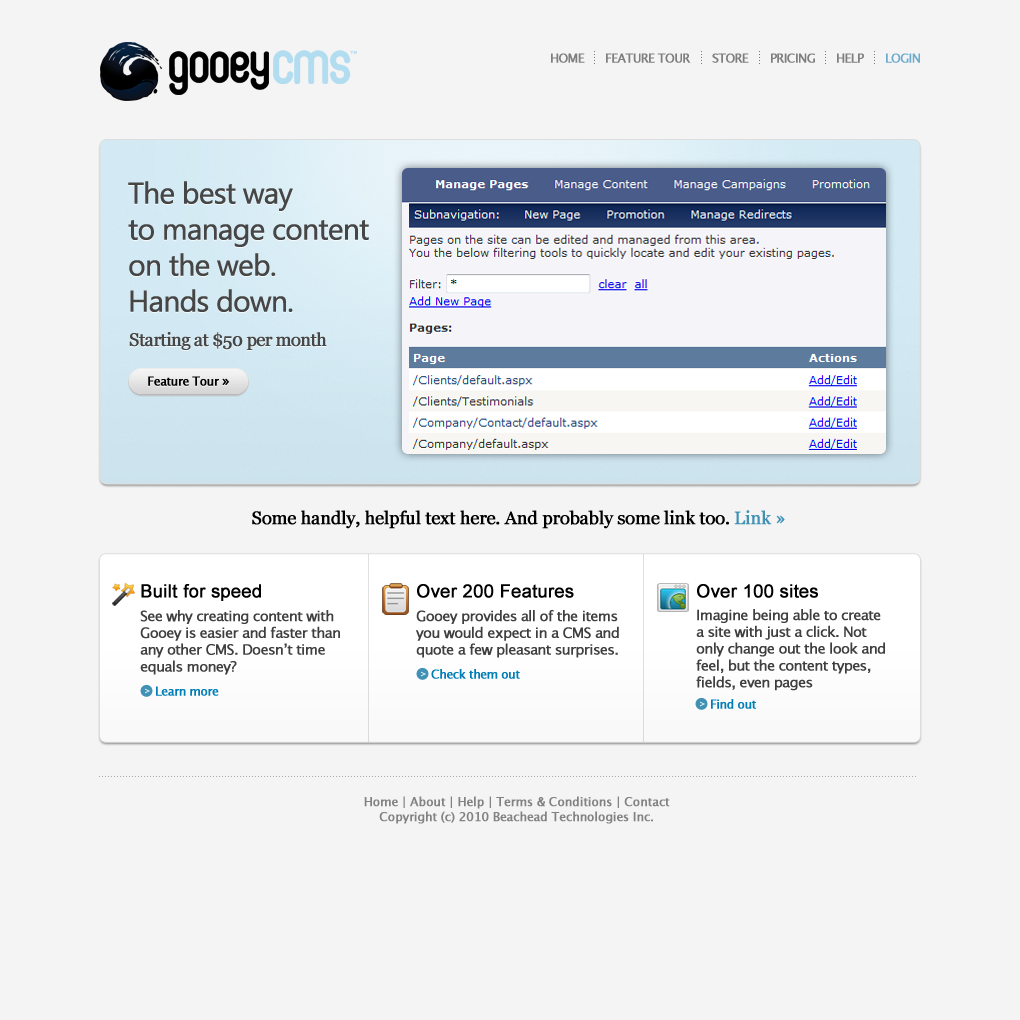
<style>
.page{position:relative;width:1020px;height:1020px;background:#f4f4f4}
.page>*{position:absolute;margin:0}
.t1{font:12px "LucidaGrande";letter-spacing:-0.05em;color:#7e7e7e;font-weight:bold}
.t2{font:12px "LucidaGrande";letter-spacing:-0.05em;color:#6eabcf;font-weight:bold}
.t3{font:30px "SegoeUI";letter-spacing:-0.05em;color:#464646;font-weight:bold}
.t4{font:18px "Georgia";letter-spacing:-0.05em;color:#464646;font-weight:bold}
.t5{font:12px "LucidaGrande";letter-spacing:-0.05em;color:#000000;font-weight:bold}
.t6{font:14px "LucidaGrande";letter-spacing:-0.05em;color:#000000;font-weight:bold}
.t7{font:18px "Georgia";letter-spacing:-0.025em;color:#000000;font-weight:bold}
.t8{font:18px "Georgia";letter-spacing:-0.025em;color:#4191b5;font-weight:bold}
.t9{font:18px "Georgia";letter-spacing:-0.05em;color:#4191b5;font-weight:bold}
.t10{font:18px "ArialMT";color:#000000;font-weight:bold}
.t11{font:14px "LucidaGrande";letter-spacing:-0.05em;color:#3f3f3f;font-weight:bold}
.t12{font:12px "LucidaGrande";letter-spacing:-0.05em;color:#027eb6;font-weight:bold}
.t13{font:12px "LucidaGrande";letter-spacing:-0.025em;color:#828282;font-weight:bold}
</style>
<div class="page">
<p class="t1" style="left:551px;top:53px;width:34px;height:10px">HOME</p>
<p class="t1" style="left:606px;top:53px;width:85px;height:10px">FEATURE TOUR</p>
<p class="t1" style="left:712px;top:53px;width:37px;height:10px">STORE</p>
<p class="t1" style="left:771px;top:53px;width:44px;height:10px">PRICING</p>
<p class="t1" style="left:837px;top:53px;width:27px;height:10px">HELP</p>
<p class="t2" style="left:886px;top:53px;width:34px;height:10px">LOGIN</p>
<p class="t3" style="left:128px;top:181px;width:241px;height:131px">The best way <br>to manage content <br>on the web. <br>Hands down.</p>
<p class="t4" style="left:129px;top:332px;width:198px;height:18px">Starting at $50 per month</p>
<p class="t5" style="left:148px;top:376px;width:81px;height:10px">Feature Tour <span class="t6">»</span></p>
<p class="t7" style="left:252px;top:510px;width:533px;height:19px">Some handly, helpful text here. And probably some link too. <span class="t8">Link </span><span class="t9">»</span></p>
<p class="t10" style="left:141px;top:584px;width:120px;height:17px">Built for speed</p>
<p class="t10" style="left:417px;top:584px;width:157px;height:14px">Over 200 Features</p>
<p class="t10" style="left:697px;top:584px;width:121px;height:14px">Over 100 sites</p>
<p class="t11" style="left:140px;top:610px;width:200px;height:65px">See why creating content with Gooey is easier and faster than any other CMS. Doesn’t time equals money?</p>
<p class="t11" style="left:416px;top:610px;width:203px;height:48px">Gooey provides all of the items you would expect in a CMS and quote a few pleasant surprises.</p>
<p class="t11" style="left:696px;top:609px;width:189px;height:82px">Imagine being able to create a site with just a click. Not only change out the look and feel, but the content types, fields, even pages</p>
<p class="t12" style="left:431px;top:669px;width:89px;height:10px">Check them out</p>
<p class="t12" style="left:156px;top:686px;width:63px;height:10px">Learn more</p>
<p class="t12" style="left:711px;top:699px;width:45px;height:10px">Find out</p>
<p class="t13" style="left:364px;top:796px;width:306px;height:28px;text-align:center">Home | About | Help | Terms &amp; Conditions | Contact<br>Copyright (c) 2010 Beachead Technologies Inc.</p>
</div>
